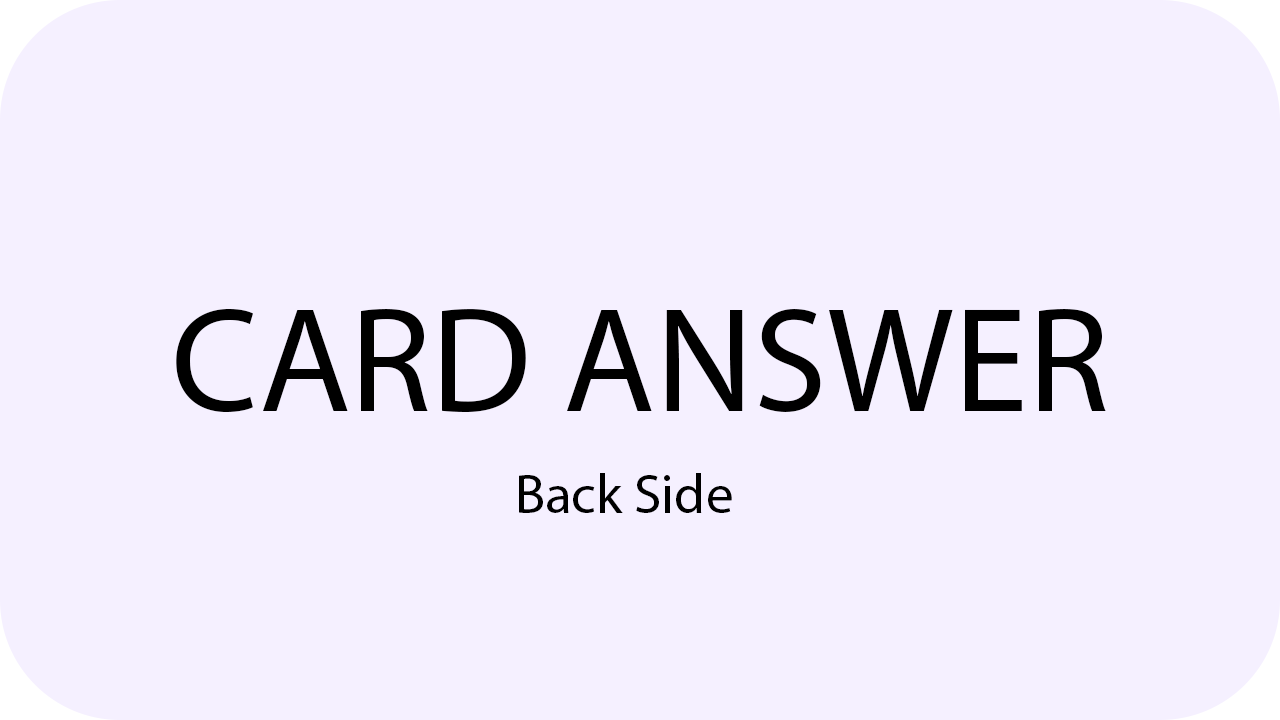
<style>
.page{position:relative;width:1280px;height:720px;background:#f5f0ff}
.page>*{position:absolute;margin:0}
.t1{font:150px "MyriadPro-Regular";color:#000000}
.t2{font:55.5px "MyriadPro-Regular";color:#000000}
</style>
<div class="page">
<p class="t1" style="left:176px;top:308px;width:930px;height:104px">CARD ANSWER</p>
<p class="t2" style="left:519px;top:473px;width:213px;height:40px">Back Side</p>
</div>
